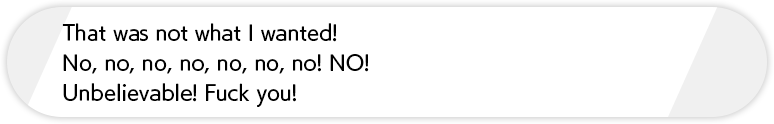
<style>
.page{position:relative;width:774px;height:124px;background:#ffffff}
.page>*{position:absolute;margin:0}
.t1{font:20px/30px "UDKakugo_LargePr6N-M";color:#000000}
</style>
<div class="page">
<p class="t1" style="left:62px;top:23px;width:307px;height:84px">That was not what I wanted!<br>No, no, no, no, no, no, no! NO!<br>Unbelievable! Fuck you!</p>
</div>
